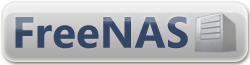
<style>
.page{position:relative;width:250px;height:65px}
.page>*{position:absolute;margin:0}
.t1{font:44px "SegoeUI-Bold";color:#344565}
</style>
<div class="page">
<p class="t1" style="left:15px;top:16px;width:173px;height:33px">FreeNAS</p>
</div>
